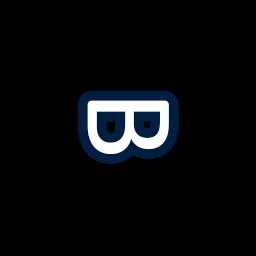
<style>
.page{position:relative;width:256px;height:256px;background:#000000}
.page>*{position:absolute;margin:0}
.t1{font:128px "Calibri";color:#ffffff}
</style>
<div class="page">
<p class="t1" style="left:87px;top:100px;width:82px;height:54px;rotate:90deg">B</p>
</div>
